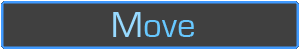
<style>
.page{position:relative;width:300px;height:50px;background:#404040}
.page>*{position:absolute;margin:0}
.t1{font:37.4px "EurostileRegular";color:#67c8ff}
.t2{font:37.4px "EurostileRegular";color:#98daff}
</style>
<div class="page">
<p class="t1" style="left:113px;top:12px;width:81px;height:25px"><span class="t2">M</span>ove</p>
</div>
